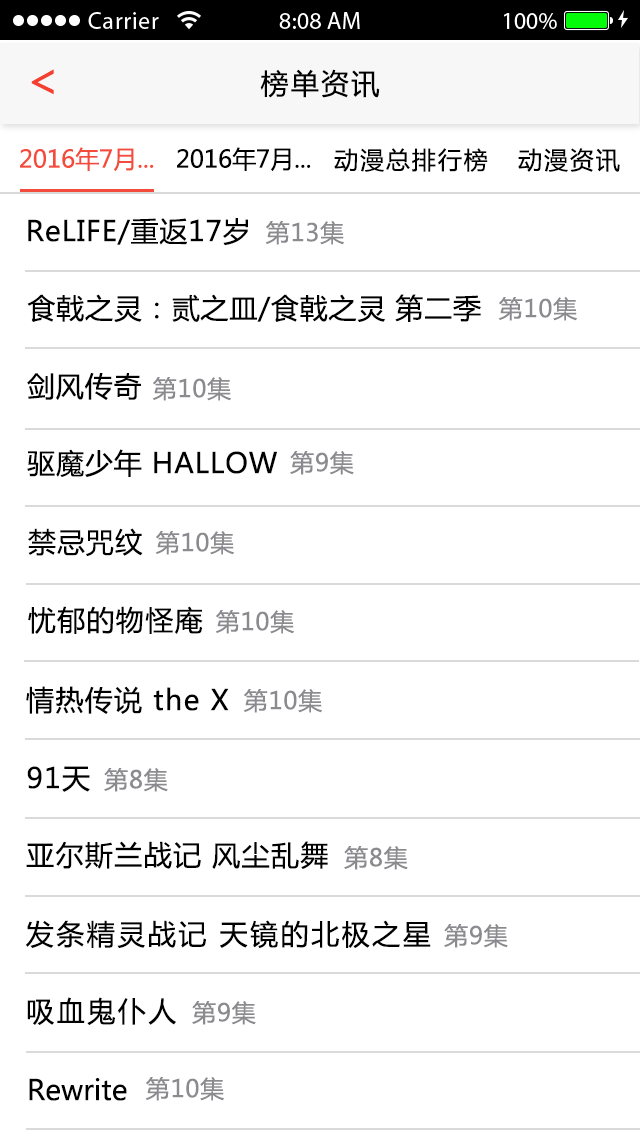
<style>
.page{position:relative;width:640px;height:1136px;background:#ffffff}
.page>*{position:absolute;margin:0}
.t1{font:47.2px "MicrosoftYaHei";letter-spacing:0.08em;color:#f44030}
.t2{font:28px "MicrosoftYaHei";letter-spacing:0.08em;color:#000000}
.t3{font:24px "MicrosoftYaHei";color:#f44c3c}
.t4{font:24px "MicrosoftYaHei";color:#010000}
.t5{font:24px "MicrosoftYaHei";letter-spacing:0.08em;color:#000000}
.t6{font:28px "MicrosoftYaHei";letter-spacing:0.03em;color:#000000}
.t7{font:24px "MicrosoftYaHei";letter-spacing:0.03em;color:#8b8b8f}
.t8{font:28px "MicrosoftYaHei";letter-spacing:0.05em;color:#000000}
.t9{font:28px "MicrosoftYaHei";letter-spacing:0.09em;color:#000000}
.t10{font:28px "MicrosoftYaHei";color:#000000}
</style>
<div class="page">
<p class="t1" style="left:31px;top:69px;width:23px;height:26px">&lt;</p>
<p class="t2" style="left:260px;top:69px;width:120px;height:29px">榜单资讯</p>
<p class="t3" style="left:20px;top:147px;width:134px;height:24px">2016年7月...</p>
<p class="t4" style="left:177px;top:147px;width:134px;height:24px">2016年7月...</p>
<p class="t5" style="left:334px;top:148px;width:154px;height:24px">动漫总排行榜</p>
<p class="t5" style="left:518px;top:148px;width:102px;height:24px">动漫资讯</p>
<p class="t6" style="left:28px;top:218px;width:220px;height:28px">ReLIFE/重返17岁</p>
<p class="t7" style="left:265px;top:221px;width:79px;height:24px">第13集</p>
<p class="t6" style="left:27px;top:294px;width:454px;height:28px">食戟之灵：贰之皿/食戟之灵 第二季</p>
<p class="t7" style="left:498px;top:297px;width:79px;height:24px">第10集</p>
<p class="t6" style="left:27px;top:372px;width:114px;height:28px">剑风传奇</p>
<p class="t7" style="left:152px;top:377px;width:79px;height:24px">第10集</p>
<p class="t6" style="left:27px;top:449px;width:250px;height:28px">驱魔少年 HALLOW</p>
<p class="t7" style="left:290px;top:451px;width:64px;height:24px">第9集</p>
<p class="t6" style="left:28px;top:528px;width:115px;height:28px">禁忌咒纹</p>
<p class="t7" style="left:155px;top:531px;width:79px;height:24px">第10集</p>
<p class="t8" style="left:28px;top:606px;width:175px;height:28px">忧郁的物怪庵</p>
<p class="t7" style="left:215px;top:610px;width:79px;height:24px">第10集</p>
<p class="t8" style="left:26px;top:686px;width:203px;height:28px">情热传说 the X</p>
<p class="t7" style="left:243px;top:689px;width:79px;height:24px">第10集</p>
<p class="t8" style="left:27px;top:766px;width:63px;height:26px">91天</p>
<p class="t7" style="left:104px;top:768px;width:64px;height:24px">第8集</p>
<p class="t8" style="left:26px;top:841px;width:302px;height:28px">亚尔斯兰战记 风尘乱舞</p>
<p class="t7" style="left:344px;top:846px;width:64px;height:24px">第8集</p>
<p class="t9" style="left:26px;top:920px;width:405px;height:28px">发条精灵战记 天镜的北极之星</p>
<p class="t7" style="left:444px;top:924px;width:64px;height:24px">第9集</p>
<p class="t9" style="left:27px;top:997px;width:149px;height:28px">吸血鬼仆人</p>
<p class="t7" style="left:192px;top:1001px;width:64px;height:24px">第9集</p>
<p class="t10" style="left:29px;top:1077px;width:98px;height:24px">Rewrite</p>
<p class="t7" style="left:145px;top:1077px;width:79px;height:24px">第10集</p>
</div>
